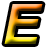
<style>
.page{position:relative;width:48px;height:48px;background:#ffffff}
.page>*{position:absolute;margin:0}
.t1{font:56.4px "Arial-BoldItalicMT"}
</style>
<div class="page">
<p class="t1" style="left:4px;top:4px;width:39px;height:40px">E</p>
</div>
